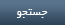
<style>
.page{position:relative;width:65px;height:25px}
.page>*{position:absolute;margin:0}
.t1{font:12px "BYekan";color:#ffffff}
</style>
<div class="page">
<p class="t1" style="left:16px;top:9px;width:32px;height:9px">جستجو</p>
</div>
